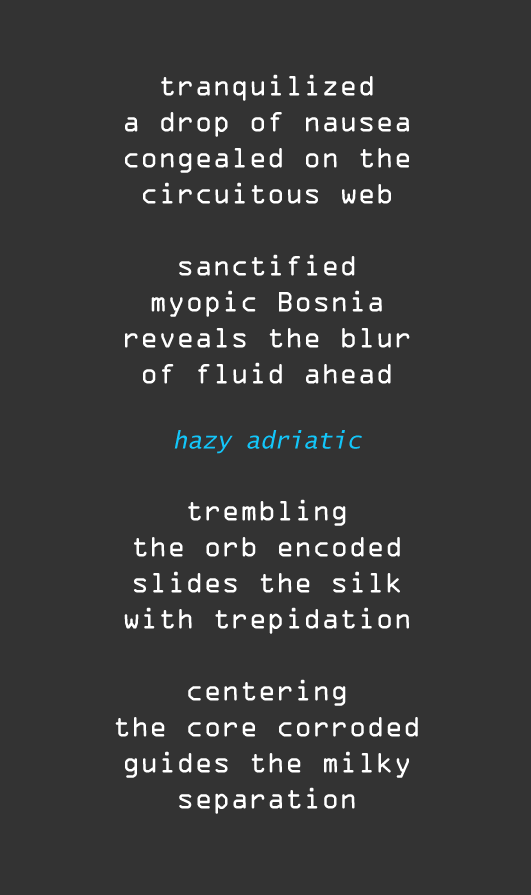
<style>
.page{position:relative;width:531px;height:895px;background:#333333}
.page>*{position:absolute;margin:0}
.t1{font:30px "OCRAExtended";color:#ffffff}
.t2{font:24px "LucidaSans-TypewriterOblique";color:#12c6fa}
</style>
<div class="page">
<p class="t1" style="left:115px;top:74px;width:303px;height:740px;text-align:center">tranquilized<br>a drop of nausea<br>congealed on the<br>circuitous web<br><br>sanctified<br>myopic Bosnia<br>reveals the blur<br>of fluid ahead<br><br><span class="t2">hazy adriatic<br></span><br>trembling<br>the orb encoded<br>slides the silk<br>with trepidation<br><br>centering<br>the core corroded<br>guides the milky<br>separation</p>
</div>
